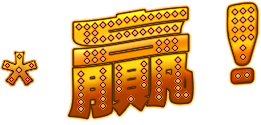
<style>
.page{position:relative;width:261px;height:125px;background:#ffffff}
.page>*{position:absolute;margin:0}
.t1{font:128px "UnboundedSans-Regular"}
.t2{font:16px "VonwaonBitmap-16px";letter-spacing:-0.5em;color:#ccbb64}
.t3{font:16px "VonwaonBitmap-16px";color:#ccbb64}
.t4{font:16px "VonwaonBitmap-16px";letter-spacing:-0.4em;color:#ccbb64}
.t5{font:16px "VonwaonBitmap-16px";letter-spacing:-0.1em;color:#ccbb64}
.t6{font:16px "VonwaonBitmap-16px";letter-spacing:-0.05em;color:#ccbb64}
.t7{font:16px "VonwaonBitmap-16px";letter-spacing:0.16em;color:#ccbb64}
</style>
<div class="page">
<p class="t1" style="left:68px;top:7px;width:125px;height:112px">贏</p>
<p class="t2" style="left:85px;top:26px;width:92px;height:17px">・・・・・・・・・・・・</p>
<p class="t2" style="left:85px;top:31px;width:12px;height:5px">・・</p>
<p class="t2" style="left:85px;top:39px;width:92px;height:17px">・・・　　　　　　・・・</p>
<p class="t2" style="left:85px;top:46px;width:92px;height:17px">・・・　　　　　　・・・</p>
<p class="t3" style="left:79px;top:58px;width:101px;height:18px"><span class="t4"> </span><span class="t5">・ </span>・・ <span class="t6">・</span><span class="t7">・</span>・</p>
<p class="t3" style="left:79px;top:65px;width:101px;height:18px"><span class="t4"> </span><span class="t5">・ </span>・・ <span class="t6">・</span><span class="t7">・</span>・</p>
<p class="t3" style="left:79px;top:72px;width:101px;height:18px"><span class="t4"> </span><span class="t5">・ </span>・・ <span class="t6">・</span><span class="t7">・</span>・</p>
<p class="t3" style="left:79px;top:79px;width:101px;height:18px"><span class="t4"> </span><span class="t5">・ </span>・・ <span class="t6">・</span><span class="t7">・</span>・</p>
<p class="t5" style="left:79px;top:86px;width:101px;height:18px"><span class="t4"> </span>・ <span class="t3">・　 　</span><span class="t7">・</span><span class="t3">・</span></p>
</div>
